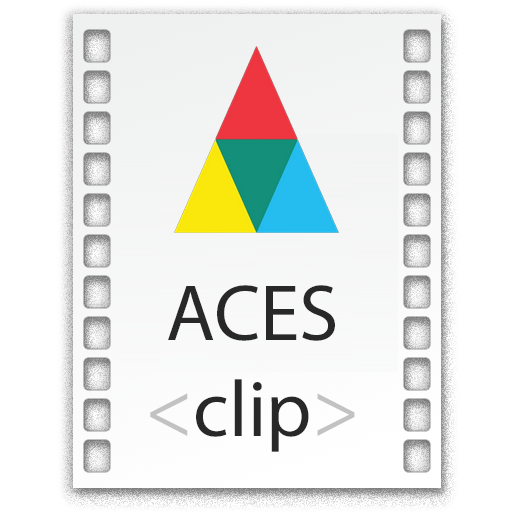
<style>
.page{position:relative;width:512px;height:512px;background:#ffffff}
.page>*{position:absolute;margin:0}
.t1{font:80.1px "MyriadPro-Regular";color:#282828}
.t2{font:80.1px "MyriadPro-Regular";color:#c2c2c2}
</style>
<div class="page">
<p class="t1" style="left:150px;top:285px;width:205px;height:167px;text-align:center">ACES<br><span class="t2">&lt;</span>clip<span class="t2">&gt;</span></p>
</div>
